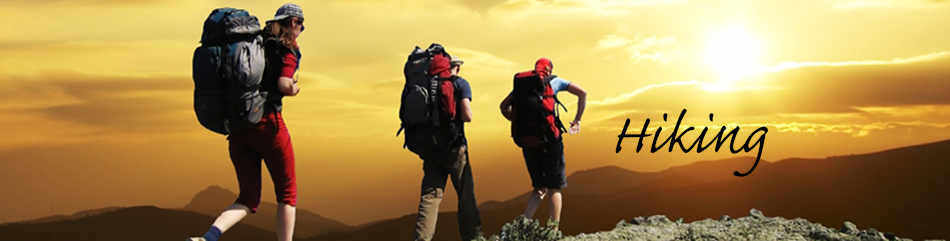
<style>
.page{position:relative;width:950px;height:241px}
.page>*{position:absolute;margin:0}
.t1{font:72px "CaflischScriptPro-Regular";color:#000000}
</style>
<div class="page">
<p class="t1" style="left:615px;top:108px;width:153px;height:69px">Hiking</p>
</div>
